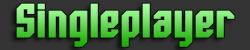
<style>
.page{position:relative;width:250px;height:50px;background:#333333}
.page>*{position:absolute;margin:0}
.t1{font:47.9px "Whitestone-Bold"}
</style>
<div class="page">
<p class="t1" style="left:16px;top:3px;width:219px;height:44px">Singleplayer</p>
</div>
